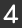
<style>
.page{position:relative;width:22px;height:28px;background:#333333}
.page>*{position:absolute;margin:0}
.t1{font:28px "PollyRounded-Regular";color:#ffffff}
</style>
<div class="page">
<p class="t1" style="left:3px;top:4px;width:16px;height:20px">4</p>
</div>
